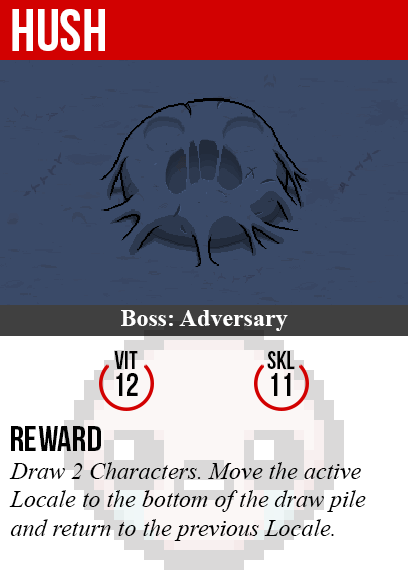
<style>
.page{position:relative;width:408px;height:585px;background:#3a4a68}
.page>*{position:absolute;margin:0}
.t1{font:60px "BebasNeue";color:#ffffff}
.t2{font:24px "TimesNewRomanPS-BoldMT";color:#ffffff}
.t3{font:25px "BebasNeue";color:#000000}
.t4{font:32px "BebasNeue";color:#000000}
.t5{font:36px "BebasNeue";color:#000000}
.t6{font:24px "TimesNewRomanPS-ItalicMT";color:#000000}
</style>
<div class="page">
<p class="t1" style="left:12px;top:9px;width:93px;height:42px">hush</p>
<p class="t2" style="left:121px;top:310px;width:167px;height:21px">Boss: Adversary</p>
<p class="t3" style="left:114px;top:351px;width:24px;height:18px">vit</p>
<p class="t3" style="left:267px;top:351px;width:28px;height:18px">skl</p>
<p class="t4" style="left:116px;top:373px;width:22px;height:23px">12</p>
<p class="t4" style="left:271px;top:373px;width:20px;height:23px">11</p>
<p class="t5" style="left:11px;top:426px;width:90px;height:25px">reward</p>
<p class="t6" style="left:9px;top:462px;width:357px;height:79px">Draw 2 Characters. Move the active<br>Locale to the bottom of the draw pile<br>and return to the previous Locale.</p>
</div>
